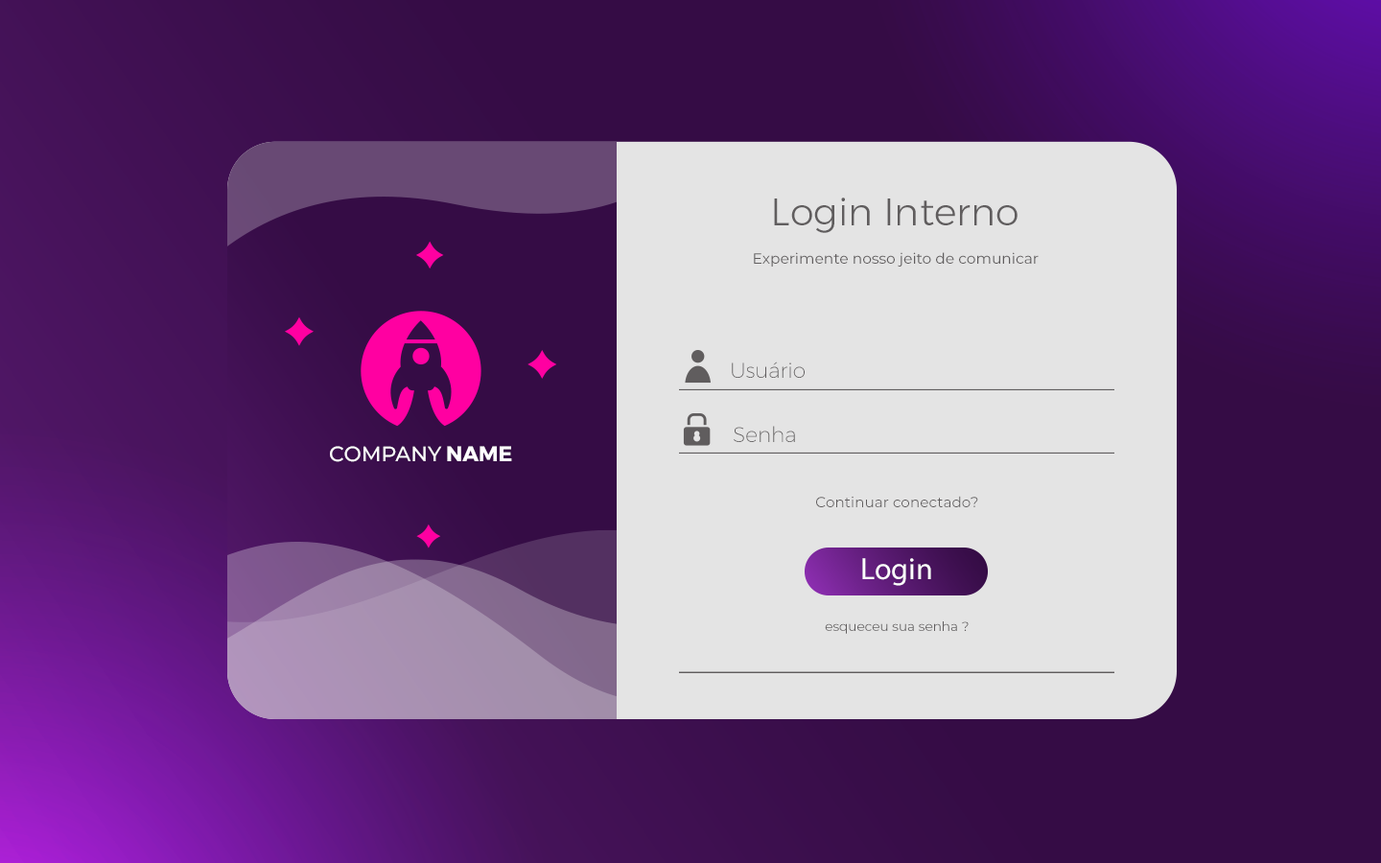
<style>
.page{position:relative;width:1381px;height:863px;background:#e4e4e4}
.page>*{position:absolute;margin:0}
.t1{font:38.2px "Montserrat-Light";color:#605d5e}
.t2{font:14.9px "Montserrat-Regular";color:#605d5e}
.t3{font:20.9px "Montserrat-ExtraLight";color:#605d5e}
.t4{font:20.9px "Montserrat-Medium";color:#ffffff}
.t5{font:20.9px "Montserrat-Bold";color:#ffffff}
.t6{font:14.7px "Montserrat-Regular";color:#605d5e}
.t7{font:30.9px "MyriadPro-Regular";color:#ffffff}
.t8{font:13.1px "Montserrat-Regular";color:#605d5e}
</style>
<div class="page">
<p class="t1" style="left:774px;top:198px;width:244px;height:35px">Login Interno</p>
<p class="t2" style="left:754px;top:252px;width:285px;height:15px">Experimente nosso jeito de comunicar</p>
<p class="t3" style="left:732px;top:362px;width:73px;height:16px">Usuário</p>
<p class="t3" style="left:734px;top:426px;width:61px;height:16px">Senha</p>
<p class="t4" style="left:330px;top:446px;width:182px;height:16px">COMPANY<span class="t5"> NAME</span></p>
<p class="t6" style="left:816px;top:496px;width:162px;height:11px">Continuar conectado?</p>
<p class="t7" style="left:862px;top:558px;width:69px;height:28px">Login</p>
<p class="t8" style="left:825px;top:622px;width:144px;height:12px">esqueceu sua senha ?</p>
</div>
